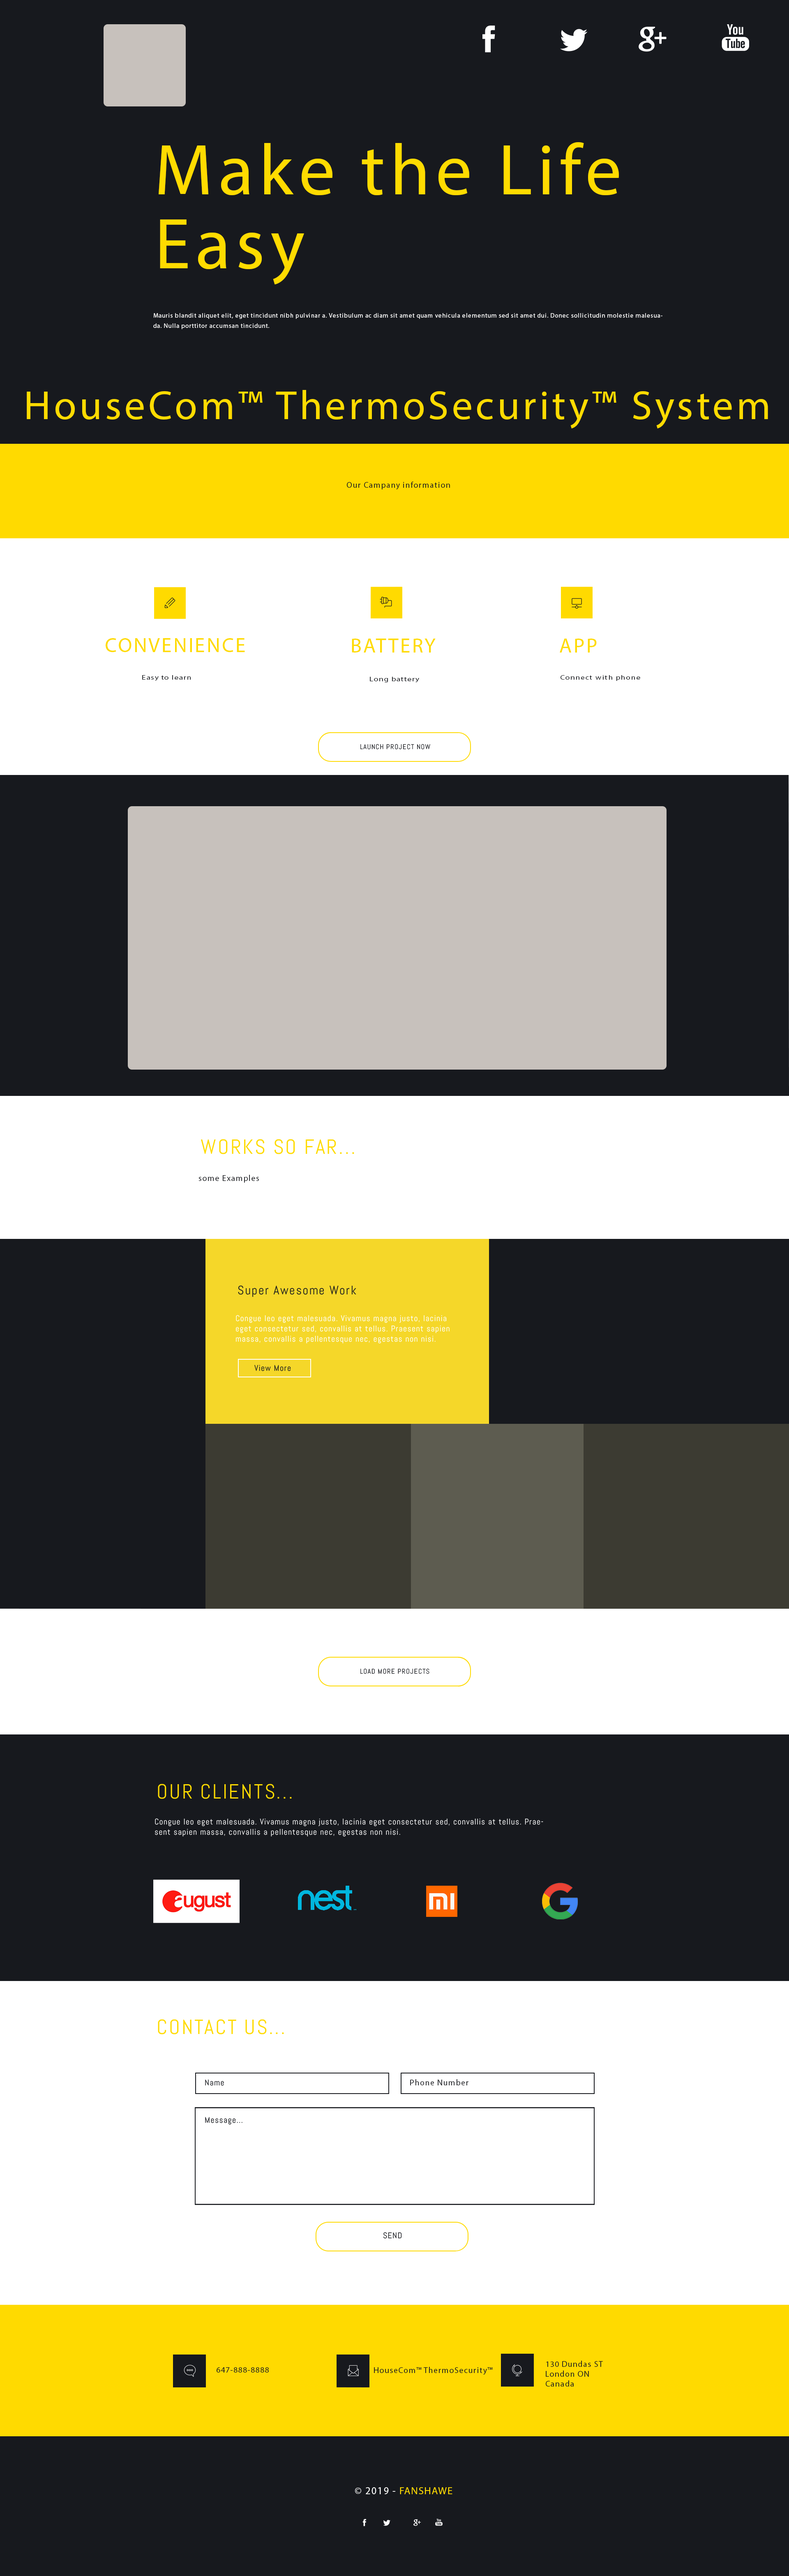
<style>
.page{position:relative;width:789px;height:2576px;background:#17191e}
.page>*{position:absolute;margin:0}
.t1{font:72.3px/74px "MyriadPro-Regular";letter-spacing:0.075em;color:#ffdb00}
.t2{font:6.2px/10.3px "MyriadPro-Regular";letter-spacing:0.075em;color:#ffffff}
.t3{font:41.1px "MyriadPro-Regular";letter-spacing:0.075em;color:#ffdb00}
.t4{font:8.2px "MyriadPro-Regular";letter-spacing:0.075em;color:#181a1f}
.t5{font:20.5px "MyriadPro-Regular";letter-spacing:0.075em;color:#ffdb00}
.t6{font:6.2px "MyriadPro-Regular";letter-spacing:0.075em;color:#181a1f;scale:1.31 1}
.t7{font:6.9px "Abel-Regular";letter-spacing:0.075em;color:#181a1f}
.t8{font:20.5px "Abel-Regular";letter-spacing:0.075em;color:#ffdb00}
.t9{font:12.3px "Abel-Regular";letter-spacing:0.075em;color:#181a1f}
.t10{font:8.2px/10.3px "Abel-Regular";letter-spacing:0.075em;color:#ffffff}
.t11{font:8.2px "Abel-Regular";letter-spacing:0.075em;color:#181a1f}
.t12{font:10.3px "MyriadPro-Regular";letter-spacing:0.075em;color:#ffffff}
.t13{font:10.3px "MyriadPro-Regular";letter-spacing:0.075em;color:#ffdb00}
</style>
<div class="page">
<p class="t1" style="left:159px;top:142px;width:460px;height:143px">Make the Life<br>Easy</p>
<p class="t2" style="left:153px;top:313px;width:509px;height:16px">Mauris blandit aliquet elit, eget tincidunt nibh pulvinar a. Vestibulum ac diam sit amet quam vehicula elementum sed sit amet dui. Donec sollicitudin molestie malesuada. Nulla porttitor accumsan tincidunt.</p>
<p class="t3" style="left:27px;top:390px;width:741px;height:39px">HouseCom™ ThermoSecurity™ System</p>
<p class="t4" style="left:347px;top:482px;width:103px;height:7px">Our Campany information</p>
<p class="t5" style="left:106px;top:638px;width:139px;height:14px">CONVENIENCE</p>
<p class="t5" style="left:352px;top:639px;width:84px;height:14px">BATTERY</p>
<p class="t5" style="left:560px;top:639px;width:37px;height:14px">APP</p>
<p class="t6" style="left:142px;top:675px;width:49px;height:6px">Easy to learn</p>
<p class="t6" style="left:370px;top:677px;width:49px;height:6px">Long battery</p>
<p class="t6" style="left:560px;top:675px;width:80px;height:6px">Connect with phone</p>
<p class="t7" style="left:360px;top:744px;width:70px;height:6px">LAUNCH PROJECT NOW</p>
<p class="t8" style="left:201px;top:1139px;width:153px;height:15px">WORKS SO FAR...</p>
<p class="t4" style="left:198px;top:1175px;width:61px;height:8px">some Examples</p>
<p class="t9" style="left:238px;top:1285px;width:118px;height:12px">Super Awesome Work</p>
<p class="t10" style="left:236px;top:1315px;width:214px;height:29px">Congue leo eget malesuada. Vivamus magna justo, lacinia eget consectetur sed, convallis at tellus. Praesent sapien massa, convallis a pellentesque nec, egestas non nisi.</p>
<p class="t11" style="left:254px;top:1365px;width:37px;height:6px">View More</p>
<p class="t7" style="left:360px;top:1668px;width:69px;height:6px">LOAD MORE PROJECTS</p>
<p class="t8" style="left:158px;top:1784px;width:134px;height:15px">OUR CLIENTS...</p>
<p class="t10" style="left:155px;top:1818px;width:388px;height:19px">Congue leo eget malesuada. Vivamus magna justo, lacinia eget consectetur sed, convallis at tellus. Praesent sapien massa, convallis a pellentesque nec, egestas non nisi.</p>
<p class="t8" style="left:158px;top:2019px;width:126px;height:15px">CONTACT US...</p>
<p class="t11" style="left:205px;top:2079px;width:19px;height:7px">Name</p>
<p class="t4" style="left:410px;top:2079px;width:58px;height:6px">Phone Number</p>
<p class="t11" style="left:205px;top:2117px;width:37px;height:8px">Message...</p>
<p class="t11" style="left:383px;top:2232px;width:19px;height:7px">SEND</p>
<p class="t4" style="left:217px;top:2367px;width:52px;height:6px">647-888-8888</p>
<p class="t4" style="left:374px;top:2367px;width:119px;height:8px">HouseCom™ ThermoSecurity™</p>
<p class="t4" style="left:546px;top:2361px;width:57px;height:26px">130 Dundas ST<br>London ON <br>Canada</p>
<p class="t12" style="left:355px;top:2487px;width:97px;height:7px">© 2019 - <span class="t13">FANSHAWE</span></p>
</div>
